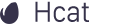
<style>
.page{position:relative;width:123px;height:24px;background:#ffffff}
.page>*{position:absolute;margin:0}
.t1{font:30px "SanFranciscoDisplay-Regular";color:#36324a;scale:0.95 1}
</style>
<div class="page">
<p class="t1" style="left:35px;top:1px;width:54px;height:21px">Hcat</p>
</div>
